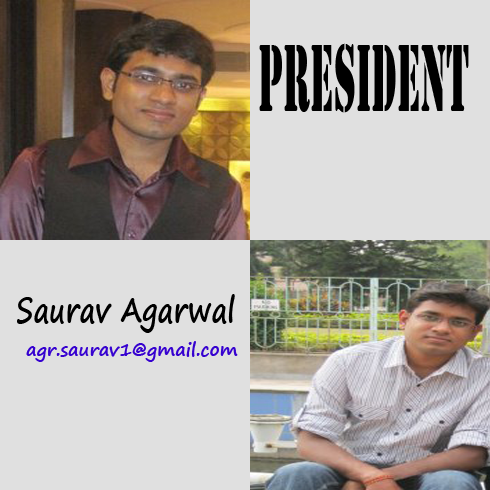
<style>
.page{position:relative;width:490px;height:490px;background:#e0e0e0}
.page>*{position:absolute;margin:0}
.t1{font:99.2px "Stencil";color:#000000;scale:0.4 1}
.t2{font:34.5px "SegoePrint-Bold";color:#000000;scale:0.79 1}
.t3{font:18px "SegoePrint-Bold";color:#3601d0}
</style>
<div class="page">
<p class="t1" style="left:259px;top:43px;width:210px;height:70px">PRESIDENT</p>
<p class="t2" style="left:17px;top:294px;width:218px;height:39px">Saurav Agarwal</p>
<p class="t3" style="left:26px;top:341px;width:212px;height:21px">agr.saurav1@gmail.com</p>
</div>
